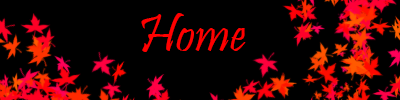
<style>
.page{position:relative;width:400px;height:100px;background:#000000}
.page>*{position:absolute;margin:0}
.t1{font:54px "Pristina-Regular";color:#ff0000}
</style>
<div class="page">
<p class="t1" style="left:141px;top:13px;width:105px;height:39px">Home</p>
</div>
